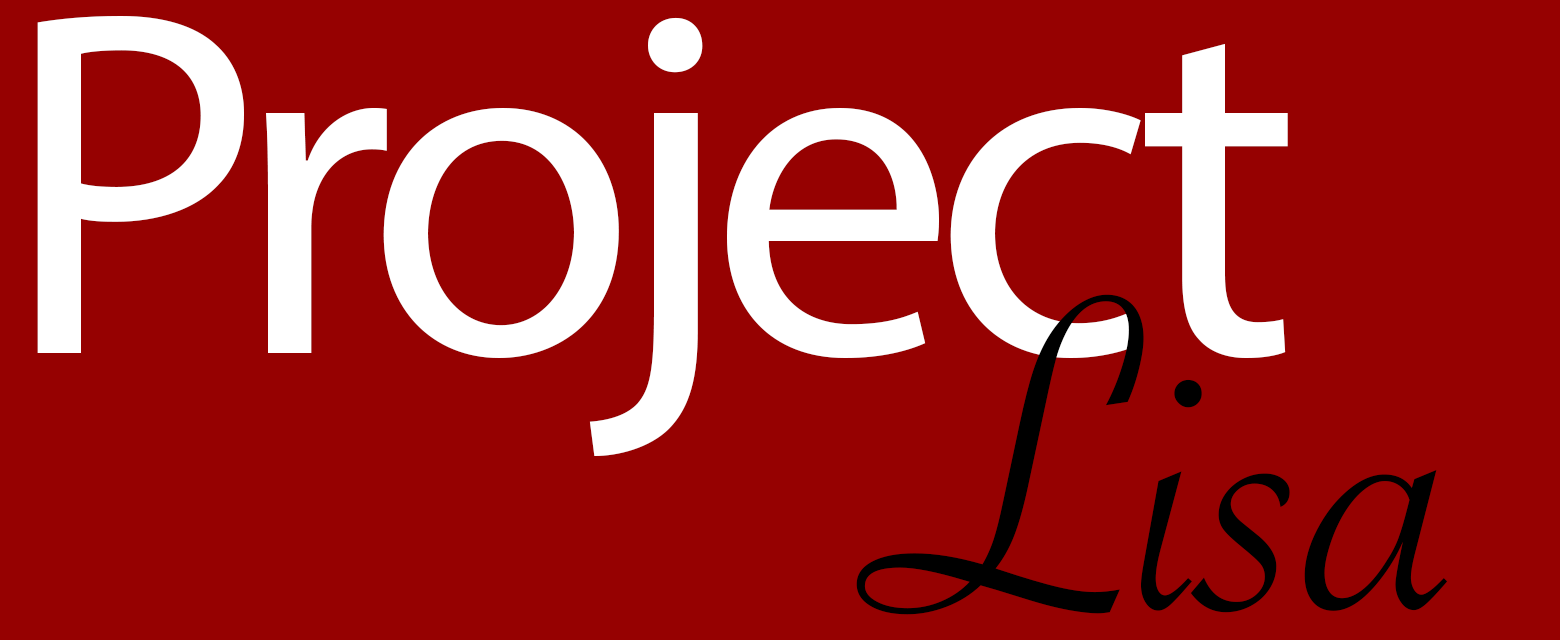
<style>
.page{position:relative;width:1560px;height:640px;background:#960101}
.page>*{position:absolute;margin:0}
.t1{font:496.7px "MyriadPro-Regular";letter-spacing:-0.05em;color:#ffffff}
.t2{font:477.8px "SavoyeLetPlain";color:#000000}
</style>
<div class="page">
<p class="t1" style="left:37px;top:16px;width:1251px;height:440px">Project</p>
<p class="t2" style="left:856px;top:294px;width:592px;height:321px">Lisa</p>
</div>
